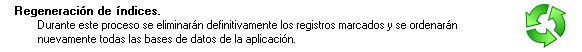
<style>
.page{position:relative;width:582px;height:52px;background:#ffffff}
.page>*{position:absolute;margin:0}
.t1{font:11.4px "MS Sans Serif";color:#000000;font-weight:bold}
.t2{font:11.4px "MS Sans Serif";color:#000000}
</style>
<div class="page">
<p class="t1" style="left:15px;top:6px;width:145px;height:11px">Regeneración de índices.</p>
<p class="t2" style="left:38px;top:20px;width:419px;height:25px">Durante este proceso se eliminarán definitivamente los registros marcados y se ordenarán<br>nuevamente todas las bases de datos de la aplicación.</p>
</div>
